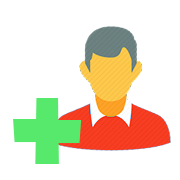
<style>
.page{position:relative;width:180px;height:180px;background:#ffffff}
.page>*{position:absolute;margin:0}
.t1{font:123.6px "RifficFree-Bold";color:#56e96b}
</style>
<div class="page">
<p class="t1" style="left:13px;top:98px;width:69px;height:66px">+</p>
</div>
